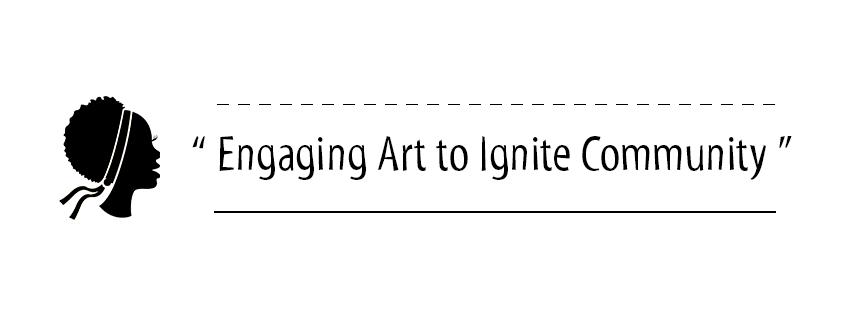
<style>
.page{position:relative;width:851px;height:315px;background:#ffffff}
.page>*{position:absolute;margin:0}
.t1{font:50px "MyriadStd-Tilt";color:#000000}
</style>
<div class="page">
<p class="t1" style="left:192px;top:136px;width:600px;height:44px">“ Engaging Art to Ignite Community ”</p>
</div>
